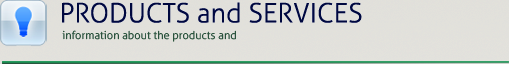
<style>
.page{position:relative;width:509px;height:64px}
.page>*{position:absolute;margin:0}
.t1{font:26.9px "Aller-Light";color:#02113c}
.t2{font:11px "Aller-Light";color:#224332}
.t3{font:10.7px "Aller-Light";color:#224332}
.t4{font:10.7px "Aller-Light";color:#02113c}
</style>
<div class="page">
<p class="t1" style="left:62px;top:2px;width:300px;height:21px">PRODUCTS and SERVICES</p>
<p class="t2" style="left:62px;top:30px;width:174px;height:12px">information about the products and <span class="t3">services </span><span class="t4">can be</span></p>
</div>
